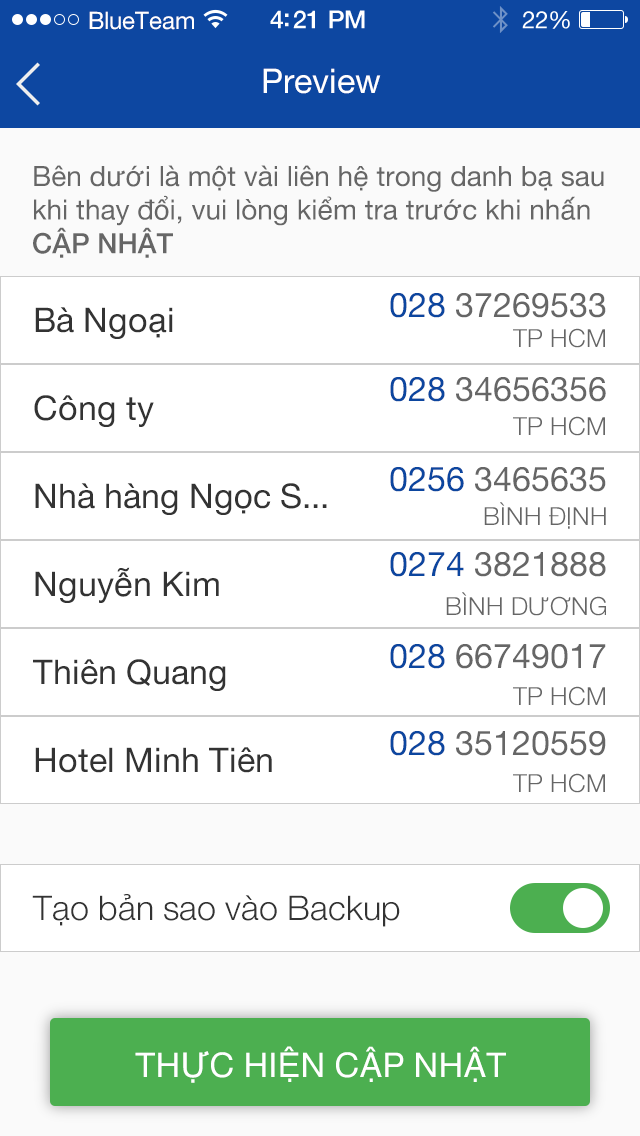
<style>
.page{position:relative;width:640px;height:1136px;background:#ffffff}
.page>*{position:absolute;margin:0}
.t1{font:24px "HelveticaNeue";color:#ffffff}
.t2{font:34px "HelveticaNeue";color:#ffffff}
.t3{font:28px/33.6px "HelveticaNeue";color:#666666}
.t4{font:28px/33.6px "HelveticaNeue-Medium";color:#666666}
.t5{font:34px "HelveticaNeue";color:#666666}
.t6{font:34px "HelveticaNeue";color:#0c469f}
.t7{font:34px "HelveticaNeue";color:#333333}
.t8{font:25px "HelveticaNeue-Light";color:#666666}
.t9{font:34px "HelveticaNeue-Light";color:#333333}
</style>
<div class="page">
<p class="t1" style="left:89px;top:11px;width:105px;height:19px">BlueTeam</p>
<p class="t2" style="left:263px;top:68px;width:118px;height:26px">Preview</p>
<p class="t3" style="left:33px;top:165px;width:571px;height:93px;text-align:justify">Bên dưới là một vài liên hệ trong danh bạ sau<br>khi thay đổi, vui lòng kiểm tra trước khi nhấn<br><span class="t4">CẬP NHẬT</span></p>
<p class="t5" style="left:390px;top:293px;width:216px;height:25px"><span class="t6">028</span> 37269533</p>
<p class="t7" style="left:35px;top:307px;width:138px;height:32px">Bà Ngoại</p>
<p class="t8" style="left:513px;top:328px;width:92px;height:20px">TP HCM</p>
<p class="t5" style="left:390px;top:377px;width:216px;height:25px"><span class="t6">028</span> 34656356</p>
<p class="t7" style="left:34px;top:395px;width:120px;height:32px">Công ty</p>
<p class="t8" style="left:513px;top:416px;width:92px;height:20px">TP HCM</p>
<p class="t5" style="left:390px;top:467px;width:216px;height:25px"><span class="t6">0256</span> 3465635</p>
<p class="t7" style="left:35px;top:483px;width:292px;height:32px">Nhà hàng Ngọc S...</p>
<p class="t8" style="left:484px;top:502px;width:122px;height:27px">BÌNH ĐỊNH</p>
<p class="t5" style="left:390px;top:552px;width:216px;height:25px"><span class="t6">0274</span> 3821888</p>
<p class="t7" style="left:35px;top:567px;width:184px;height:36px">Nguyễn Kim</p>
<p class="t8" style="left:446px;top:592px;width:160px;height:24px">BÌNH DƯƠNG</p>
<p class="t5" style="left:390px;top:644px;width:216px;height:25px"><span class="t6">028</span> 66749017</p>
<p class="t7" style="left:33px;top:659px;width:193px;height:32px">Thiên Quang</p>
<p class="t8" style="left:513px;top:686px;width:92px;height:20px">TP HCM</p>
<p class="t5" style="left:390px;top:731px;width:216px;height:25px"><span class="t6">028</span> 35120559</p>
<p class="t7" style="left:35px;top:747px;width:237px;height:26px">Hotel Minh Tiên</p>
<p class="t8" style="left:513px;top:773px;width:92px;height:20px">TP HCM</p>
<p class="t9" style="left:32px;top:894px;width:368px;height:33px">Tạo bản sao vào Backup</p>
<p class="t2" style="left:135px;top:1046px;width:371px;height:37px">THỰC HIỆN CẬP NHẬT</p>
</div>
